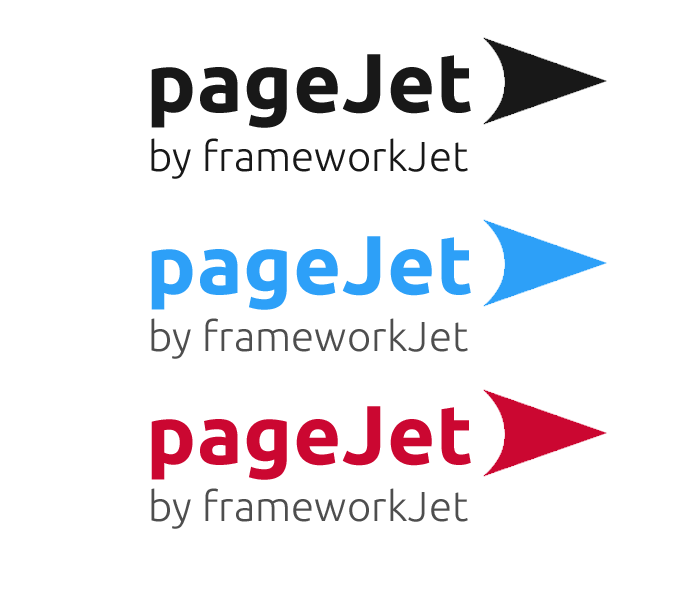
<style>
.page{position:relative;width:700px;height:600px;background:#ffffff}
.page>*{position:absolute;margin:0}
.t1{font:83.3px "Ubuntu-Bold";letter-spacing:0.005em;color:#181818}
.t2{font:41.7px "Ubuntu-Light";letter-spacing:0.005em;color:#181818}
.t3{font:83.3px "Ubuntu-Bold";letter-spacing:0.005em;color:#2da0f8}
.t4{font:41.7px "Ubuntu-Light";letter-spacing:0.005em;color:#4e4e4e}
.t5{font:83.3px "Ubuntu-Bold";letter-spacing:0.005em;color:#cb0731}
</style>
<div class="page">
<p class="t1" style="left:151px;top:54px;width:320px;height:74px">pageJet</p>
<p class="t2" style="left:151px;top:138px;width:317px;height:41px">by frameworkJet</p>
<p class="t3" style="left:151px;top:236px;width:320px;height:74px">pageJet</p>
<p class="t4" style="left:151px;top:318px;width:317px;height:41px">by frameworkJet</p>
<p class="t5" style="left:151px;top:406px;width:320px;height:74px">pageJet</p>
<p class="t4" style="left:151px;top:488px;width:317px;height:41px">by frameworkJet</p>
</div>
